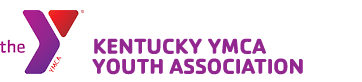
<style>
.page{position:relative;width:362px;height:82px;background:#ffffff}
.page>*{position:absolute;margin:0}
.t1{font:21.9px "Cachet-Bold";letter-spacing:-0.002em;color:#92278f}
</style>
<div class="page">
<p class="t1" style="left:94px;top:38px;width:172px;height:16px">KENTUCKY YMCA</p>
<p class="t1" style="left:92px;top:58px;width:211px;height:17px">YOUTH ASSOCIATION</p>
</div>
